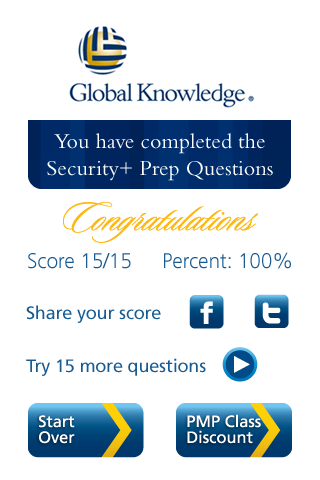
<style>
.page{position:relative;width:320px;height:480px;background:#ffffff}
.page>*{position:absolute;margin:0}
.t1{font:22px "Bembo";color:#ffffff}
.t2{font:21px "Frutiger-Light";letter-spacing:-0.01em;color:#175b93}
.t3{font:18px "Frutiger-Roman";letter-spacing:-0.01em;color:#175b93}
</style>
<div class="page">
<p class="t1" style="left:47px;top:133px;width:226px;height:48px;text-align:center">You have completed the<br>Security+ Prep Questions</p>
<p class="t2" style="left:28px;top:253px;width:103px;height:16px">Score 15/15</p>
<p class="t2" style="left:164px;top:252px;width:127px;height:17px">Percent: 100%</p>
<p class="t3" style="left:26px;top:305px;width:135px;height:18px">Share your score</p>
<p class="t3" style="left:26px;top:358px;width:180px;height:18px">Try 15 more questions</p>
</div>
